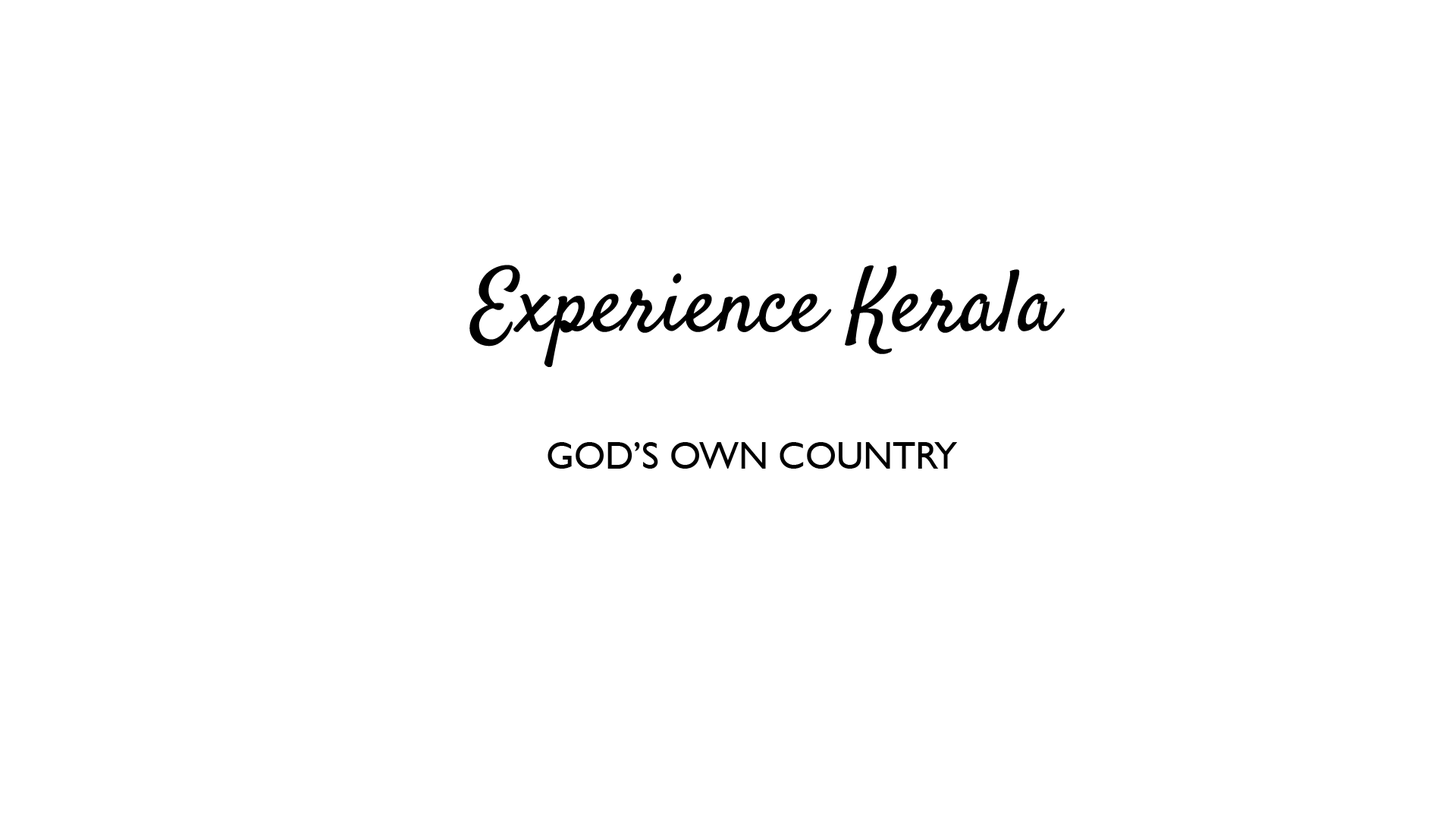
<style>
.page{position:relative;width:1456px;height:819px;background:#ffffff}
.page>*{position:absolute;margin:0}
.t1{font:88.1px/50.4px "Satisfy-Regular";color:#000000}
.t2{font:37.8px/50.4px "GillSansMT";color:#000000}
</style>
<div class="page">
<p class="t1" style="left:469px;top:265px;width:596px;height:204px;text-align:center">Experience Kerala<br><span class="t2">GOD’S OWN COUNTRY</span></p>
</div>
